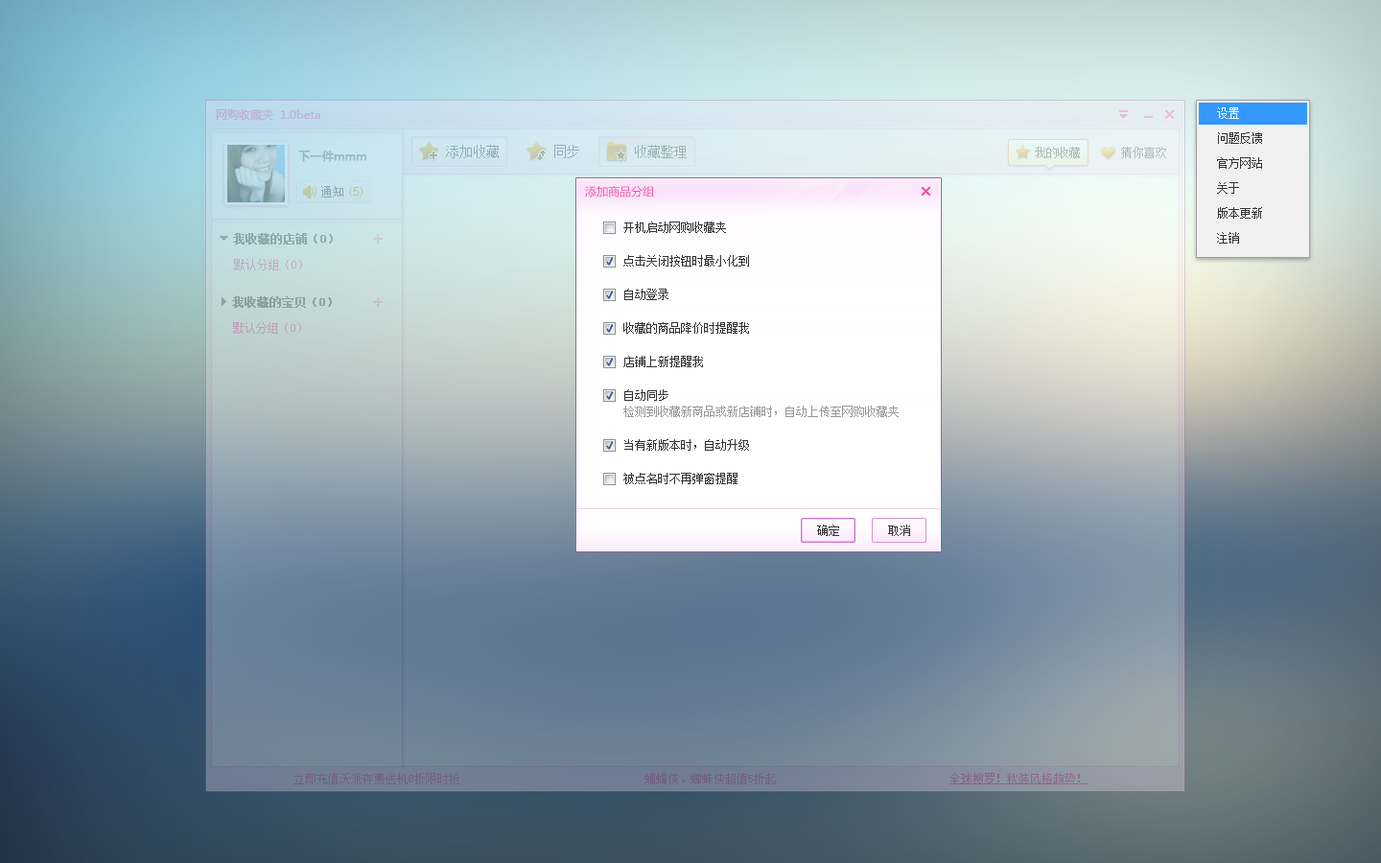
<style>
.page{position:relative;width:1381px;height:863px}
.page>*{position:absolute;margin:0}
.t1{font:11.5px/24.9px "SimSun";color:#333333}
.t2{font:11.5px/24.9px "SimSun";color:#ffffff}
.t3{font:11.5px "MicrosoftYaHei";color:#fc4ea9}
.t4{font:11.5px/33.6px "SimSun";color:#333333}
.t5{font:11.5px/16.3px "SimSun";color:#333333}
.t6{font:11.5px/33.6px "SimSun";color:#999999}
.t7{font:11.5px "SimSun";color:#333333}
</style>
<div class="page">
<p class="t1" style="left:1217px;top:107px;width:45px;height:137px"><span class="t2">设置<br></span>问题反馈<br>官方网站<br>关于<br>版本更新<br>注销</p>
<p class="t3" style="left:585px;top:185px;width:69px;height:13px">添加商品分组</p>
<p class="t4" style="left:623px;top:222px;width:276px;height:262px">开机启动网购收藏夹<br>点击关闭按钮时最小化到<br>自动登录<br>收藏的商品降价时提醒我<br>店铺上新提醒我<br><span class="t5">自动同步<br></span><span class="t6">检测到收藏新商品或新店铺时，自动上传至网购收藏夹<br></span>当有新版本时，自动升级<br>被点名时不再弹窗提醒</p>
<p class="t7" style="left:817px;top:525px;width:22px;height:11px">确定</p>
<p class="t7" style="left:888px;top:525px;width:22px;height:11px">取消</p>
</div>
